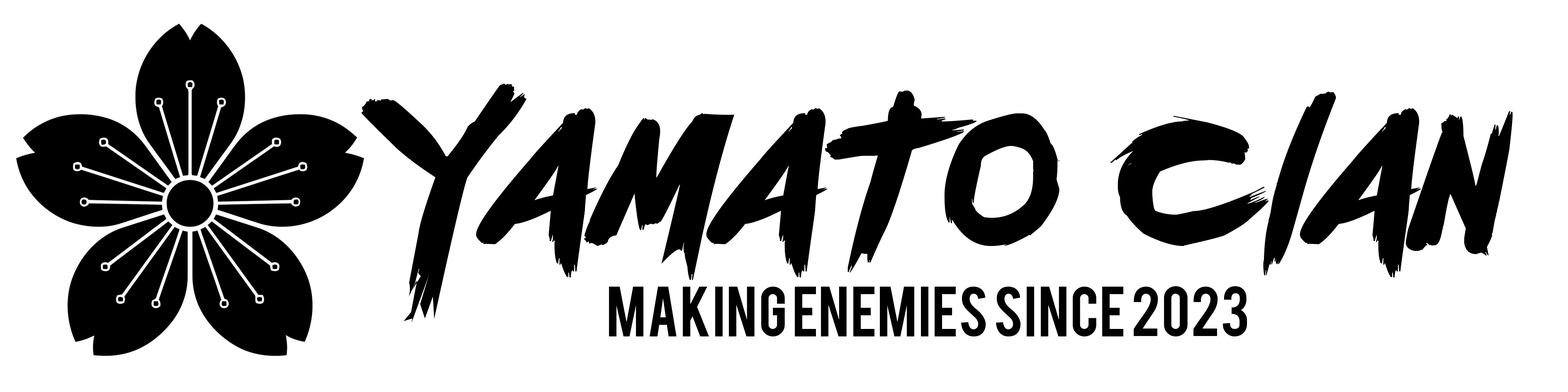
<style>
.page{position:relative;width:1568px;height:392px;background:#ffffff}
.page>*{position:absolute;margin:0}
.t1{font:182.5px "outrunfuture";color:#000000}
.t2{font:55.3px "Bebas";color:#000000}
</style>
<div class="page">
<p class="t1" style="left:361px;top:83px;width:1152px;height:240px">Yamato clan</p>
<p class="t2" style="left:609px;top:286px;width:638px;height:50px">Making enemies since 2023</p>
</div>
